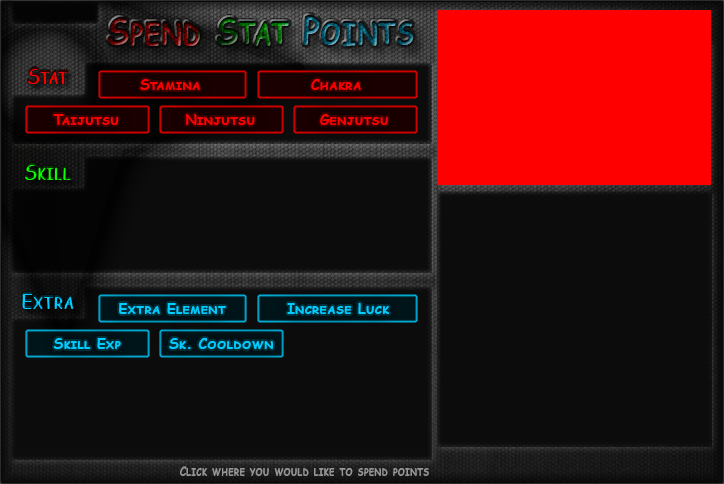
<style>
.page{position:relative;width:724px;height:484px;background:#0c0c0c}
.page>*{position:absolute;margin:0}
.t1{font:21.3px "ComicSansMS-Bold";font-variant:small-caps;scale:0.83 1}
.t2{font:14.2px "ComicSansMS-Bold";color:#ff0000;font-variant:small-caps}
.t3{font:14.2px "ComicSansMS-Bold";color:#00ccff;font-variant:small-caps}
.t4{font:12.8px "ComicSansMS-Bold";color:#969696;font-variant:small-caps;scale:0.83 1}
</style>
<div class="page">
<p class="t1" style="left:27px;top:67px;width:41px;height:17px">Stat</p>
<p class="t2" style="left:140px;top:79px;width:60px;height:11px">Stamina</p>
<p class="t2" style="left:311px;top:79px;width:50px;height:11px">Chakra</p>
<p class="t2" style="left:53px;top:114px;width:66px;height:11px">Taijutsu</p>
<p class="t2" style="left:186px;top:114px;width:69px;height:11px">Ninjutsu</p>
<p class="t2" style="left:320px;top:114px;width:68px;height:11px">Genjutsu</p>
<p class="t1" style="left:24px;top:163px;width:47px;height:17px">Skill</p>
<p class="t1" style="left:22px;top:292px;width:52px;height:17px">Extra</p>
<p class="t3" style="left:119px;top:303px;width:107px;height:11px">Extra Element</p>
<p class="t3" style="left:287px;top:303px;width:103px;height:11px">Increase Luck</p>
<p class="t3" style="left:53px;top:338px;width:68px;height:11px">Skill Exp</p>
<p class="t3" style="left:169px;top:338px;width:105px;height:11px">Sk. Cooldown</p>
<p class="t4" style="left:180px;top:466px;width:249px;height:10px">Click where you would like to spend points</p>
</div>
